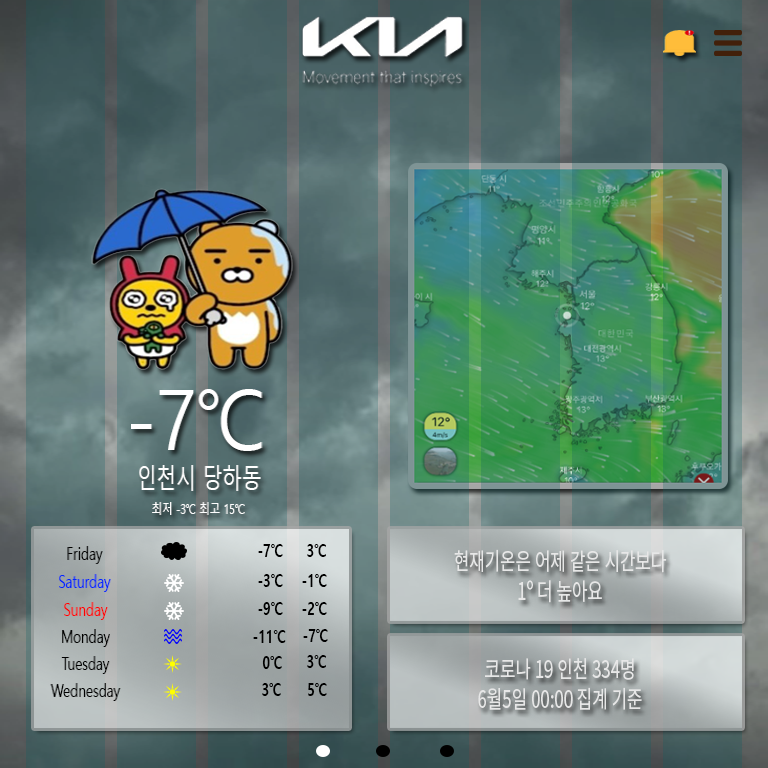
<style>
.page{position:relative;width:768px;height:768px}
.page>*{position:absolute;margin:0}
.t1{font:82.6px "MalgunGothic";color:#ffffff;scale:0.89 1}
.t2{font:26.6px "MalgunGothic";color:#ffffff;scale:0.73 1}
.t3{font:14px "MalgunGothic";color:#ffffff;scale:0.73 1}
.t4{font:17.6px "MalgunGothicBold";color:#000000;scale:0.74 1}
.t5{font:18px "MalgunGothic";color:#000000;scale:0.73 1}
.t6{font:18px "MalgunGothic";color:#0024ff;scale:0.73 1}
.t7{font:18px "MalgunGothic";color:#ff0000;scale:0.73 1}
</style>
<div class="page">
<p class="t1" style="left:131px;top:389px;width:132px;height:62px">-7℃</p>
<p class="t2" style="left:139px;top:465px;width:122px;height:26px">인천시 당하동</p>
<p class="t3" style="left:152px;top:502px;width:93px;height:13px">최저 -3℃ 최고 15℃</p>
<p class="t4" style="left:258px;top:544px;width:25px;height:13px">-7℃</p>
<p class="t4" style="left:307px;top:544px;width:19px;height:13px">3℃</p>
<p class="t5" style="left:67px;top:546px;width:36px;height:18px">Friday</p>
<p class="t6" style="left:59px;top:574px;width:52px;height:18px">Saturday</p>
<p class="t4" style="left:258px;top:574px;width:25px;height:13px">-3℃</p>
<p class="t4" style="left:302px;top:574px;width:25px;height:13px">-1℃</p>
<p class="t7" style="left:64px;top:602px;width:44px;height:18px">Sunday</p>
<p class="t4" style="left:258px;top:602px;width:25px;height:13px">-9℃</p>
<p class="t4" style="left:302px;top:602px;width:25px;height:13px">-2℃</p>
<p class="t5" style="left:62px;top:629px;width:48px;height:18px">Monday</p>
<p class="t4" style="left:253px;top:630px;width:33px;height:13px">-11℃</p>
<p class="t4" style="left:303px;top:629px;width:25px;height:13px">-7℃</p>
<p class="t5" style="left:61px;top:656px;width:49px;height:18px">Tuesday</p>
<p class="t4" style="left:262px;top:656px;width:20px;height:13px">0℃</p>
<p class="t4" style="left:307px;top:655px;width:19px;height:13px">3℃</p>
<p class="t5" style="left:50px;top:683px;width:71px;height:18px">Wednesday</p>
<p class="t4" style="left:262px;top:683px;width:19px;height:13px">3℃</p>
<p class="t4" style="left:308px;top:683px;width:19px;height:13px">5℃</p>
</div>
